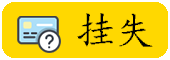
<style>
.page{position:relative;width:170px;height:60px;background:#ffd800}
.page>*{position:absolute;margin:0}
.t1{font:40px "¿¬Ìå";color:#000000}
</style>
<div class="page">
<p class="t1" style="left:77px;top:13px;width:76px;height:34px">挂失</p>
</div>
